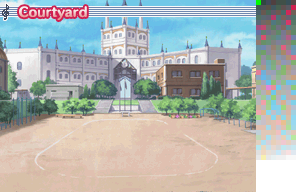
<style>
.page{position:relative;width:296px;height:192px}
.page>*{position:absolute;margin:0}
.t1{font:12px "HummingStd-E";letter-spacing:0.02em}
</style>
<div class="page">
<p class="t1" style="left:19px;top:6px;width:68px;height:14px">Courtyard</p>
</div>
